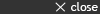
<style>
.page{position:relative;width:100px;height:14px;background:#333333}
.page>*{position:absolute;margin:0}
.t1{font:12px "TrebuchetMS";color:#ffffff}
</style>
<div class="page">
<p class="t1" style="left:71px;top:2px;width:27px;height:9px">close</p>
</div>
